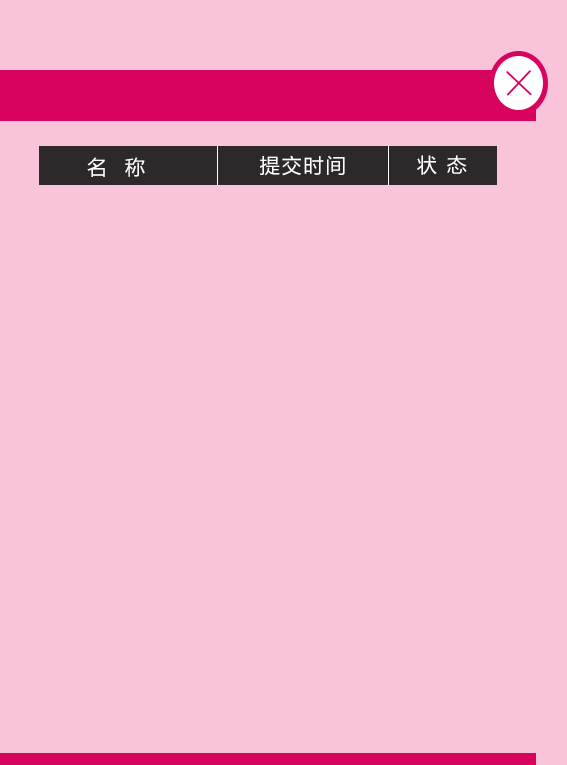
<style>
.page{position:relative;width:567px;height:765px;background:#f9c3da}
.page>*{position:absolute;margin:0}
.t1{font:20px "MicrosoftYaHei";letter-spacing:0.1em;color:#ffffff;text-transform:uppercase}
</style>
<div class="page">
<p class="t1" style="left:87px;top:157px;width:58px;height:20px">名  称</p>
<p class="t1" style="left:260px;top:155px;width:85px;height:21px">提交时间</p>
<p class="t1" style="left:417px;top:155px;width:50px;height:20px">状 态</p>
</div>
